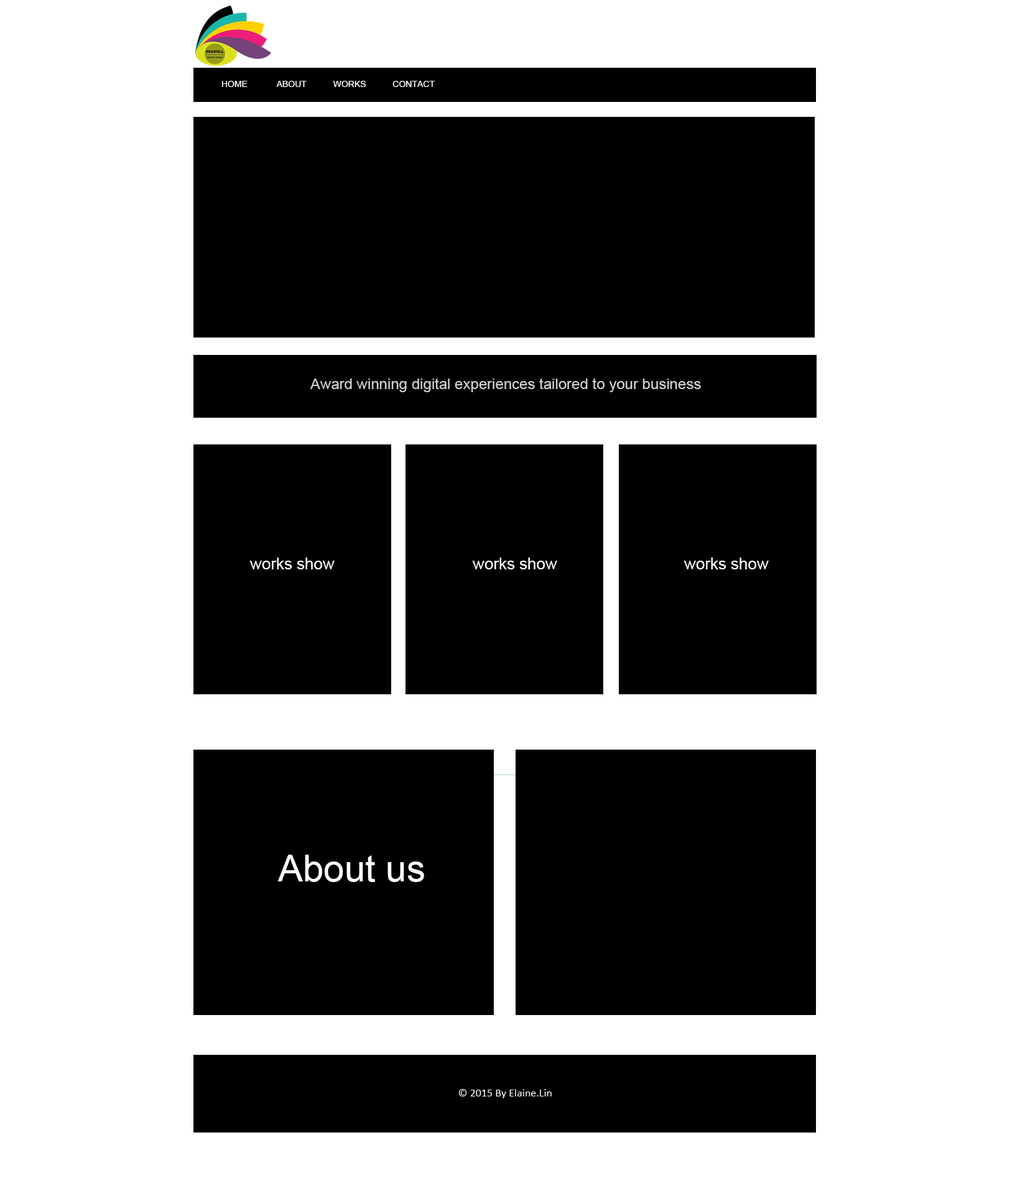
<style>
.page{position:relative;width:1010px;height:1181px;background:#ffffff}
.page>*{position:absolute;margin:0}
.t1{font:8.7px "ArialMT";color:#ffffff;text-transform:uppercase}
.t2{font:14.9px "ArialMT";color:#cfcfcf}
.t3{font:16.2px "ArialMT";color:#ffffff}
.t4{font:37.3px "ArialMT";color:#ffffff}
.t5{font:11.2px "Calibri";color:#ffffff}
</style>
<div class="page">
<p class="t1" style="left:222px;top:81px;width:213px;height:6px">HOME            ABOUT           works           CONTACT</p>
<p class="t2" style="left:310px;top:378px;width:391px;height:14px">Award winning digital experiences tailored to your business</p>
<p class="t3" style="left:249px;top:558px;width:85px;height:11px">works show</p>
<p class="t3" style="left:472px;top:558px;width:85px;height:11px">works show</p>
<p class="t3" style="left:683px;top:558px;width:85px;height:11px">works show</p>
<p class="t4" style="left:277px;top:855px;width:147px;height:27px">About us</p>
<p class="t5" style="left:458px;top:1089px;width:93px;height:9px">© 2015 By Elaine.Lin</p>
</div>
